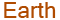
<style>
.page{position:relative;width:60px;height:20px;background:#ffffff}
.page>*{position:absolute;margin:0}
.t1{font:25px "Vrinda";color:#af4b00}
</style>
<div class="page">
<p class="t1" style="left:4px;top:2px;width:52px;height:16px">Earth</p>
</div>
